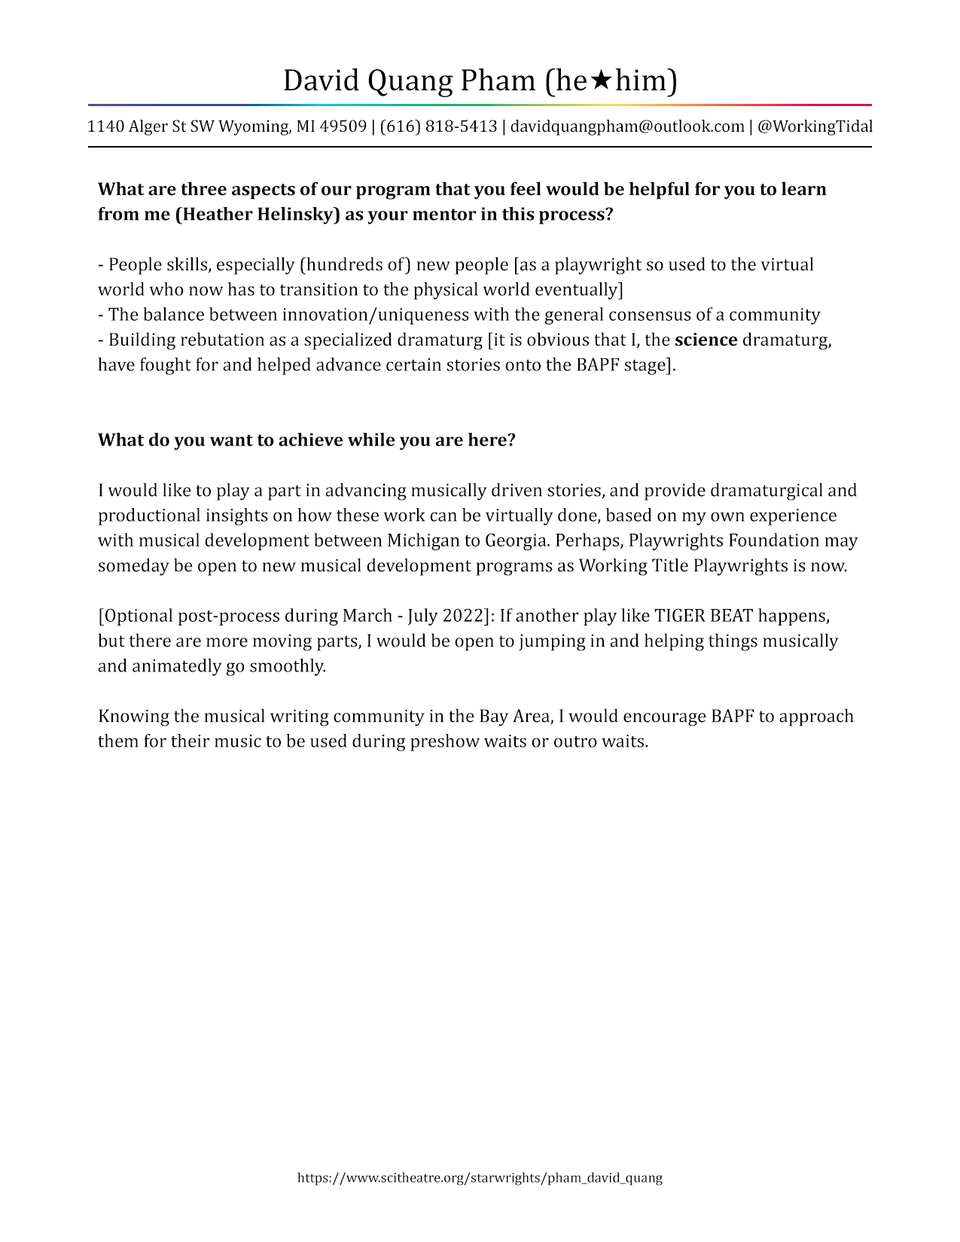
<style>
.page{position:relative;width:960px;height:1242px;background:#ffffff}
.page>*{position:absolute;margin:0}
.t1{font:31.4px "Cambria";color:#000000}
.t2{font:28.5px "MyriadPro-Regular";color:#ffffff}
.t3{font:17.3px "Cambria";color:#000000}
.t4{font:18.8px/25.1px "Cambria";color:#000000}
.t5{font:18.8px/25.1px "Cambria-Bold";color:#000000}
.t6{font:14.1px "Cambria";color:#000000}
</style>
<div class="page">
<p class="t1" style="left:284px;top:68px;width:392px;height:29px">David Quang Pham (he <span class="t2">★ </span>him)</p>
<p class="t3" style="left:87px;top:120px;width:786px;height:16px">1140 Alger St SW Wyoming, MI 49509 | (616) 818-5413 | davidquangpham@outlook.com | @WorkingTidal</p>
<p class="t4" style="left:98px;top:181px;width:760px;height:570px"><span class="t5">What are three aspects of our program that you feel would be helpful for you to learn <br>from me (Heather Helinsky) as your mentor in this process?<br></span><br>- People skills, especially (hundreds of) new people [as a playwright so used to the virtual <br>world who now has to transition to the physical world eventually]<br>- The balance between innovation/uniqueness with the general consensus of a community<br>- Building rebutation as a specialized dramaturg [it is obvious that I, the <span class="t5">science </span>dramaturg, <br>have fought for and helped advance certain stories onto the BAPF stage].<br><br><br><span class="t5">What do you want to achieve while you are here?<br></span><br>I would like to play a part in advancing musically driven stories, and provide dramaturgical and<br>productional insights on how these work can be virtually done, based on my own experience <br>with musical development between Michigan to Georgia. Perhaps, Playwrights Foundation may<br>someday be open to new musical development programs as Working Title Playwrights is now.<br><br>[Optional post-process during March - July 2022]: If another play like TIGER BEAT happens,<br>but there are more moving parts, I would be open to jumping in and helping things musically<br>and animatedly go smoothly.<br><br>Knowing the musical writing community in the Bay Area, I would encourage BAPF to approach<br>them for their music to be used during preshow waits or outro waits.</p>
<p class="t6" style="left:297px;top:1172px;width:366px;height:14px">https://www.scitheatre.org/starwrights/pham_david_quang</p>
</div>
